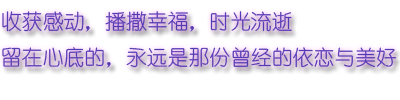
<style>
.page{position:relative;width:400px;height:100px;background:#ffffff}
.page>*{position:absolute;margin:0}
.t1{font:20.8px "YouYuan";color:#523cb2}
</style>
<div class="page">
<p class="t1" style="left:2px;top:11px;width:395px;height:57px">收获感动，播撒幸福，时光流逝<br>留在心底的，永远是那份曾经的依恋与美好</p>
</div>
